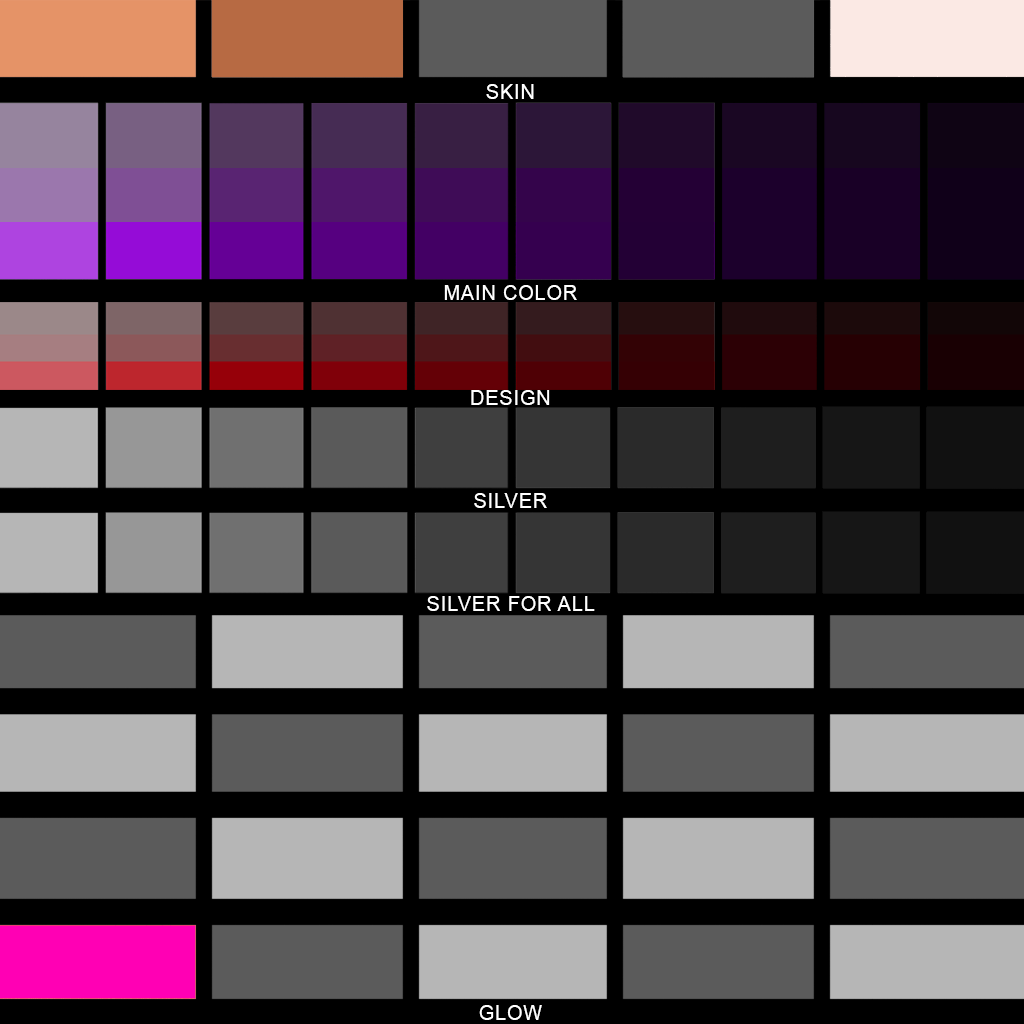
<style>
.page{position:relative;width:1024px;height:1024px;background:#000000}
.page>*{position:absolute;margin:0}
.t1{font:20px "ArialMT";letter-spacing:0.05em;color:#ffffff}
</style>
<div class="page">
<p class="t1" style="left:486px;top:84px;width:48px;height:15px">SKIN</p>
<p class="t1" style="left:444px;top:285px;width:133px;height:15px">MAIN COLOR</p>
<p class="t1" style="left:471px;top:390px;width:79px;height:15px">DESIGN</p>
<p class="t1" style="left:474px;top:493px;width:73px;height:15px">SILVER</p>
<p class="t1" style="left:427px;top:596px;width:168px;height:15px">SILVER FOR ALL</p>
<p class="t1" style="left:479px;top:1005px;width:63px;height:15px">GLOW</p>
</div>
